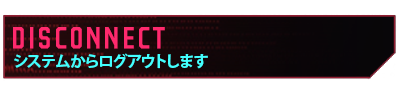
<style>
.page{position:relative;width:400px;height:95px;background:#ffffff}
.page>*{position:absolute;margin:0}
.t1{font:52.5px "Party-Lights-[WLM]-Flat";color:#ff296d}
.t2{font:15.7px "KozGoPr6N-Bold";color:#43ffff}
</style>
<div class="page">
<p class="t1" style="left:13px;top:27px;width:152px;height:22px">Disconnect</p>
<p class="t2" style="left:14px;top:53px;width:194px;height:16px">システムからログアウトします</p>
</div>
